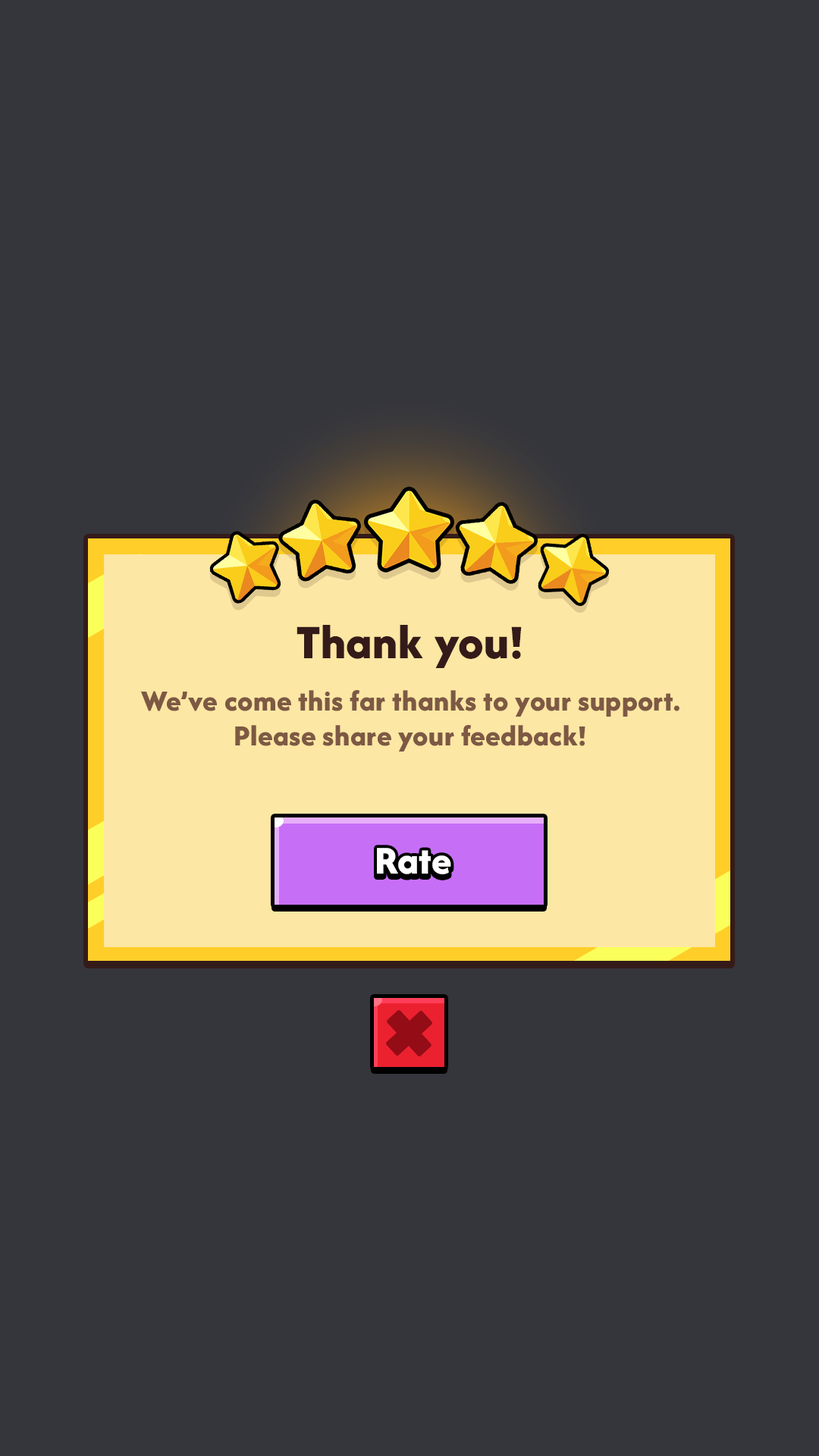
<style>
.page{position:relative;width:819px;height:1456px;background:#35363c}
.page>*{position:absolute;margin:0}
.t1{font:50px "AfacadFlux-ExtraBold";letter-spacing:0.01em;color:#341b19}
.t2{font:30.3px/34.9px "AfacadFlux-ExtraBold";letter-spacing:0.01em;color:#7d5944}
.t3{font:40.9px "AfacadFlux-ExtraBold";letter-spacing:0.01em;color:#ffffff}
</style>
<div class="page">
<p class="t1" style="left:297px;top:625px;width:225px;height:43px">Thank you!</p>
<p class="t2" style="left:140px;top:690px;width:539px;height:61px;text-align:center">We’ve come this far thanks to your support.<br>Please share your feedback!</p>
<p class="t3" style="left:377px;top:848px;width:74px;height:26px">Rate</p>
</div>
